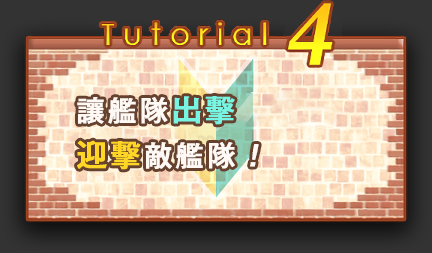
<style>
.page{position:relative;width:432px;height:253px}
.page>*{position:absolute;margin:0}
.t1{font:28px/45px "GothicMB101Pr6N-Medium";letter-spacing:0.1em;color:#fff9f5;font-weight:bold}
.t2{font:30px/45px "GothicMB101Pr6N-Medium";letter-spacing:0.1em;color:#77f5e2;font-weight:bold}
.t3{font:30px/45px "GothicMB101Pr6N-Medium";letter-spacing:0.1em;color:#ffd526;font-weight:bold}
.t4{font:28px/45px "GothicMB101Pr6N-Medium";letter-spacing:0.1em;color:#fff9f5;font-weight:bold;font-style:italic}
</style>
<div class="page">
<p class="t1" style="left:77px;top:96px;width:182px;height:74px">讓艦隊<span class="t2">出擊<br></span><span class="t3">迎擊</span>敵艦隊<span class="t4">！</span></p>
</div>
